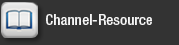
<style>
.page{position:relative;width:179px;height:45px;background:#333333}
.page>*{position:absolute;margin:0}
.t1{font:15.3px "HelveticaNeueLTPro-MdCn";color:#f6f6f6}
</style>
<div class="page">
<p class="t1" style="left:46px;top:14px;width:106px;height:11px">Channel-Resource</p>
</div>
